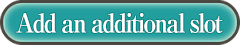
<style>
.page{position:relative;width:240px;height:45px}
.page>*{position:absolute;margin:0}
.t1{font:26px "RyuminPro-ExBold";letter-spacing:-0.08em;color:#ffffff;scale:0.9 1}
</style>
<div class="page">
<p class="t1" style="left:16px;top:13px;width:207px;height:20px">Add an additional slot</p>
</div>
